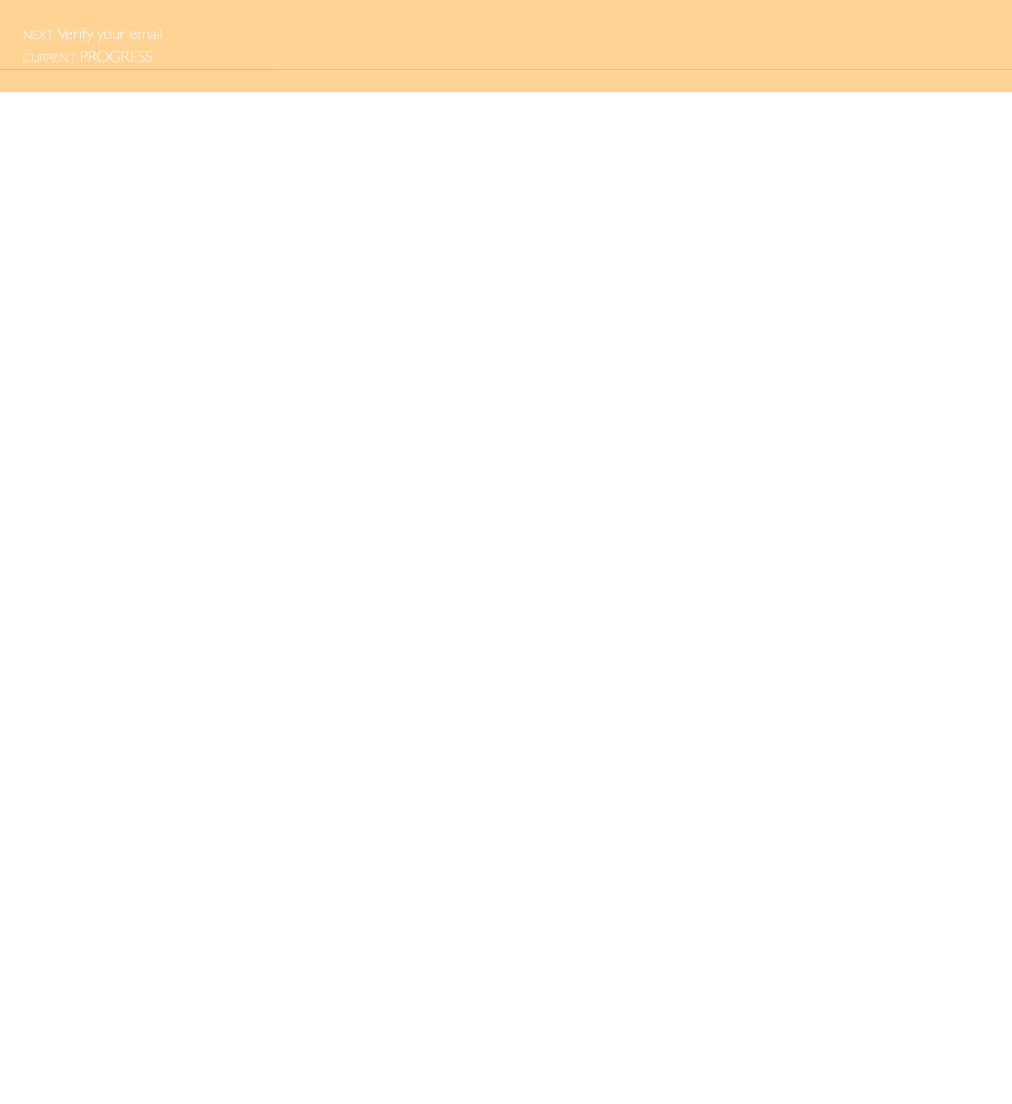
<style>
.page{position:relative;width:1012px;height:1104px;background:#ffffff}
.page>*{position:absolute;margin:0}
.t1{font:16px "GillSansMTPro-Light";color:#ffffff}
.t2{font:12px "GillSansMTPro-Light";color:#ffffff}
.t3{font:16px "GillSansMTPro-Light";color:#ffffff;text-transform:uppercase}
.t4{font:12px "GillSansMTPro-Light";color:#ffffff;text-transform:uppercase}
</style>
<div class="page">
<p class="t1" style="left:24px;top:27px;width:138px;height:16px"><span class="t2">NEXT</span> Verify your email</p>
<p class="t3" style="left:23px;top:50px;width:130px;height:13px"><span class="t4">Current</span> Progress</p>
</div>
